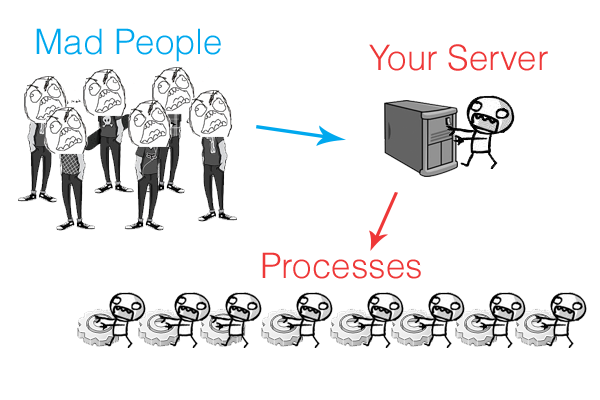
<style>
.page{position:relative;width:600px;height:400px;background:#ffffff}
.page>*{position:absolute;margin:0}
.t1{font:35px "Helvetica-Light";color:#00a8ee}
.t2{font:35px "Helvetica-Light";color:#ee3939}
.t3{font:35px "Helvetica-Light";color:#ee3838}
</style>
<div class="page">
<p class="t1" style="left:36px;top:28px;width:185px;height:34px">Mad People</p>
<p class="t2" style="left:369px;top:44px;width:179px;height:27px">Your Server</p>
<p class="t3" style="left:262px;top:252px;width:159px;height:27px">Processes</p>
</div>
